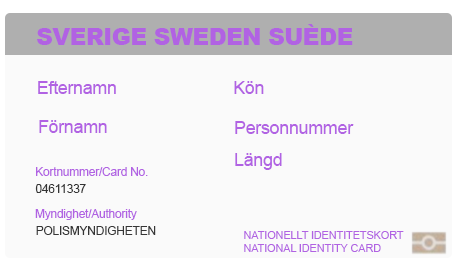
<style>
.page{position:relative;width:457px;height:272px;background:#fafafa}
.page>*{position:absolute;margin:0}
.t1{font:23px "Arial-Black";letter-spacing:-0.02em;color:#b162e3}
.t2{font:18px "ArialMT";letter-spacing:-0.02em;color:#b162e3}
.t3{font:12px "ArialMT";letter-spacing:-0.02em;color:#b162e3}
.t4{font:12px "ArialMT";letter-spacing:-0.02em;color:#353535}
.t5{font:11.1px "ArialMT";letter-spacing:-0.02em;color:#b162e3}
</style>
<div class="page">
<p class="t1" style="left:37px;top:24px;width:316px;height:21px">SVERIGE SWEDEN SUÈDE</p>
<p class="t2" style="left:38px;top:81px;width:78px;height:13px">Efternamn</p>
<p class="t2" style="left:234px;top:81px;width:30px;height:13px">Kön</p>
<p class="t2" style="left:39px;top:120px;width:68px;height:13px">Förnamn</p>
<p class="t2" style="left:235px;top:121px;width:119px;height:13px">Personnummer</p>
<p class="t2" style="left:235px;top:153px;width:47px;height:17px">Längd</p>
<p class="t3" style="left:36px;top:167px;width:112px;height:9px">Kortnummer/Card No.</p>
<p class="t4" style="left:35px;top:184px;width:51px;height:9px">04611337</p>
<p class="t3" style="left:35px;top:209px;width:102px;height:11px">Myndighet/Authority</p>
<p class="t4" style="left:36px;top:226px;width:120px;height:9px">POLISMYNDIGHETEN</p>
<p class="t5" style="left:244px;top:231px;width:160px;height:8px">NATIONELLT IDENTITETSKORT</p>
<p class="t5" style="left:244px;top:244px;width:137px;height:8px">NATIONAL IDENTITY CARD</p>
</div>
